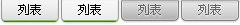
<style>
.page{position:relative;width:240px;height:25px}
.page>*{position:absolute;margin:0}
.t1{font:12px "SimSun";color:#000000}
.t2{font:12px "SimSun";color:#666666}
</style>
<div class="page">
<p class="t1" style="left:18px;top:4px;width:23px;height:11px">列表</p>
<p class="t1" style="left:78px;top:4px;width:23px;height:11px">列表</p>
<p class="t2" style="left:138px;top:4px;width:23px;height:11px">列表</p>
<p class="t2" style="left:198px;top:4px;width:23px;height:11px">列表</p>
</div>
